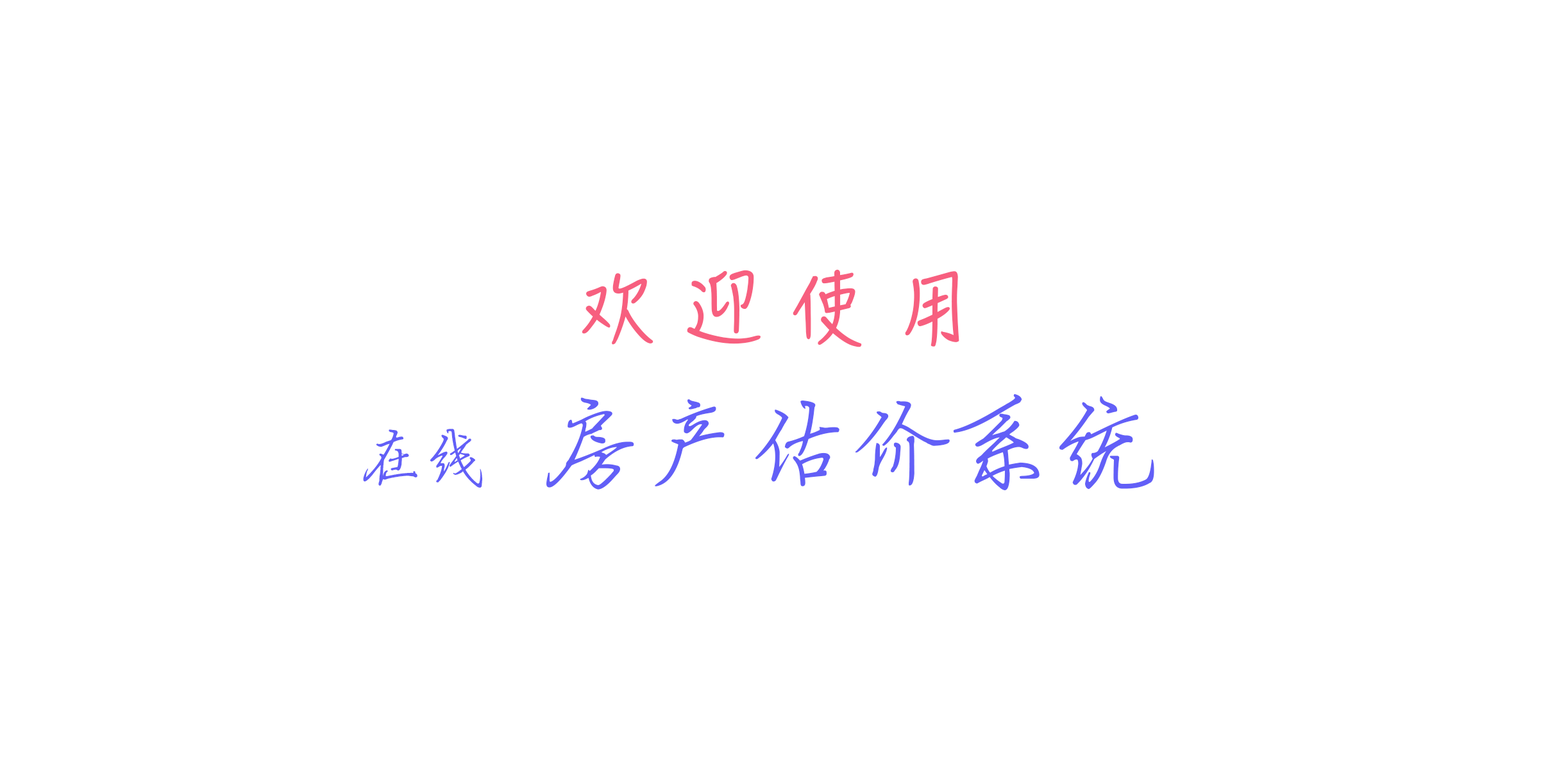
<style>
.page{position:relative;width:1550px;height:769px;background:#ffffff}
.page>*{position:absolute;margin:0}
.t1{font:76.9px "HanziPenSC-W5";color:#f75f7f}
.t2{font:102.6px "Jyinbixinsu";color:#625ff7}
.t3{font:64.1px "Jyinbixinsu";color:#625ff7}
</style>
<div class="page">
<p class="t1" style="left:582px;top:269px;width:377px;height:79px">欢 迎 使 用</p>
<p class="t2" style="left:363px;top:394px;width:791px;height:97px"><span class="t3">在线</span>  房产估价系统</p>
</div>
